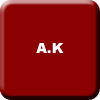
<style>
.page{position:relative;width:100px;height:100px;background:#8b0000}
.page>*{position:absolute;margin:0}
.t1{font:14px "Arial-Black";color:#fffeff}
</style>
<div class="page">
<p class="t1" style="left:36px;top:43px;width:28px;height:10px">A.K</p>
</div>
